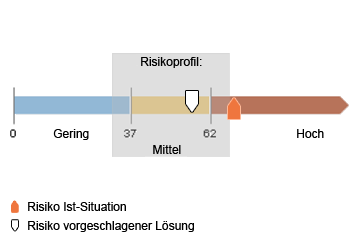
<style>
.page{position:relative;width:360px;height:239px;background:#ffffff}
.page>*{position:absolute;margin:0}
.t1{font:12px "ArialMT";color:#000000}
</style>
<div class="page">
<p class="t1" style="left:141px;top:57px;width:61px;height:11px">Risikoprofil:</p>
<p class="t1" style="left:53px;top:129px;width:36px;height:11px">Gering</p>
<p class="t1" style="left:297px;top:129px;width:27px;height:9px">Hoch</p>
<p class="t1" style="left:153px;top:145px;width:28px;height:9px">Mittel</p>
<p class="t1" style="left:28px;top:202px;width:98px;height:9px">Risiko Ist-Situation</p>
<p class="t1" style="left:28px;top:221px;width:166px;height:11px">Risiko vorgeschlagener Lösung</p>
</div>
